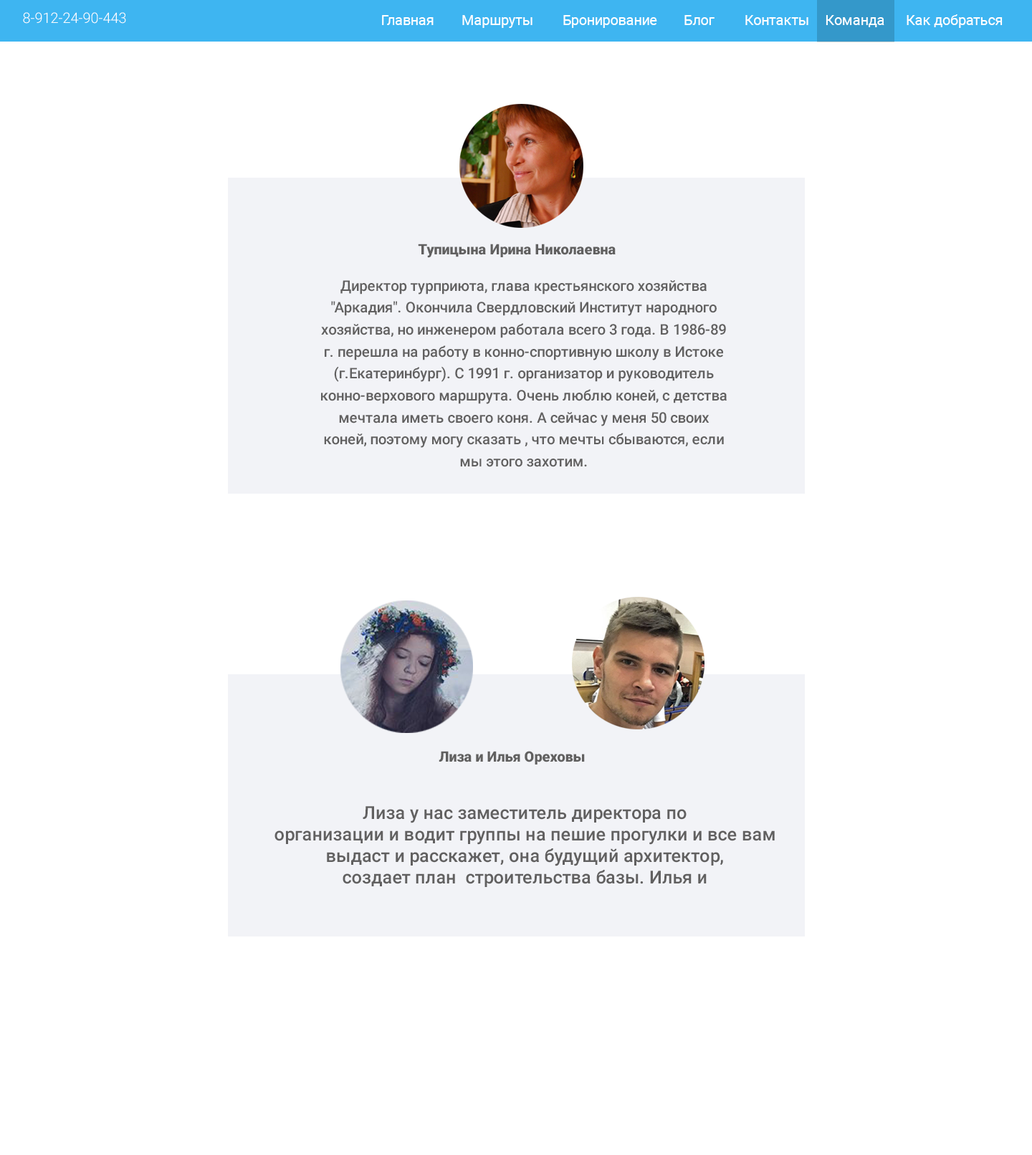
<style>
.page{position:relative;width:1032px;height:1155px;background:#ffffff}
.page>*{position:absolute;margin:0}
.t1{font:14.3px "Roboto-Light";color:#ffffff}
.t2{font:14px "Roboto-Regular";color:#ffffff}
.t3{font:14.3px "Roboto-Black";color:#616060}
.t4{font:14.7px/22px "Roboto-Medium";color:#616060}
.t5{font:17.9px/21.5px "Roboto-Medium";color:#616060}
</style>
<div class="page">
<p class="t1" style="left:23px;top:12px;width:103px;height:12px">8-912-24-90-443</p>
<p class="t2" style="left:382px;top:14px;width:621px;height:14px">Главная  Маршруты  Бронирование  Блог  Контакты Команда  Как добраться</p>
<p class="t3" style="left:418px;top:244px;width:198px;height:14px">Тупицына Ирина Николаевна</p>
<p class="t4" style="left:321px;top:280px;width:406px;height:187px;text-align:center">Директор турприюта, глава крестьянского хозяйства "Аркадия". Окончила Свердловский Институт народного хозяйства, но инженером работала всего 3 года. В 1986-89г. перешла на работу в конно-спортивную школу в Истоке (г.Екатеринбург). С 1991 г. организатор и руководитель конно-верхового маршрута. Очень люблю коней, с детства мечтала иметь своего коня. А сейчас у меня 50 своих коней, поэтому могу сказать , что мечты сбываются, если мы этого захотим.</p>
<p class="t3" style="left:439px;top:751px;width:146px;height:14px">Лиза и Илья Ореховы</p>
<p class="t5" style="left:275px;top:806px;width:500px;height:81px;text-align:center">Лиза у нас заместитель директора по <br>организации и водит группы на пешие прогулки и все вам <br>выдаст и расскажет, она будущий архитектор, <br>создает план  строительства базы. Илья и <br>группы водит, и строит, и сайты делает, они познакомились в тайге 6 лет назад, это наша молоденькая семья .</p>
</div>
